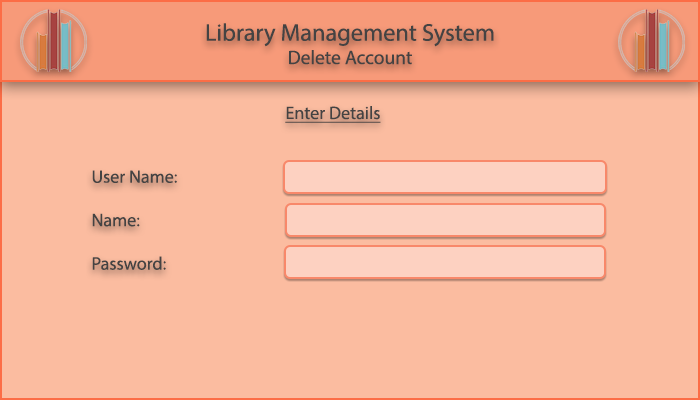
<style>
.page{position:relative;width:700px;height:400px;background:#fbbca0}
.page>*{position:absolute;margin:0}
.t1{font:24.3px "MyriadPro-Regular";color:#444343}
.t2{font:19.4px "MyriadPro-Regular";color:#444343}
.t3{font:18.1px "MyriadPro-Regular";color:#444343;text-decoration:underline}
.t4{font:18.1px "MyriadPro-Regular";color:#444343}
</style>
<div class="page">
<p class="t1" style="left:206px;top:23px;width:288px;height:42px;text-align:center">Library Management System<br><span class="t2">Delete Account</span></p>
<p class="t3" style="left:285px;top:106px;width:96px;height:17px">Enter Details</p>
<p class="t4" style="left:92px;top:170px;width:85px;height:100px">User Name: <br><br>Name:<br><br>Password:</p>
</div>
